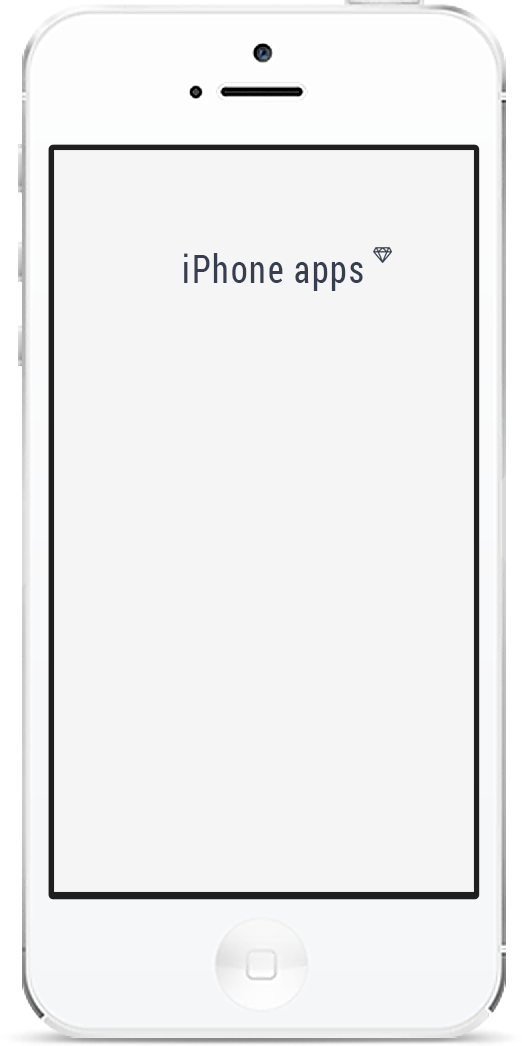
<style>
.page{position:relative;width:522px;height:1046px;background:#f5f5f5}
.page>*{position:absolute;margin:0}
.t1{font:38.7px "RobotoCondensed-Regular";letter-spacing:0.05em;color:#363e4f;scale:0.89 1}
</style>
<div class="page">
<p class="t1" style="left:184px;top:253px;width:179px;height:38px">iPhone apps</p>
</div>
